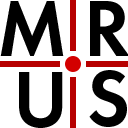
<style>
.page{position:relative;width:128px;height:128px;background:#ffffff}
.page>*{position:absolute;margin:0}
.t1{font:82.3px "FuturaPT-Demi";color:#000000}
</style>
<div class="page">
<p class="t1" style="left:0px;top:1px;width:64px;height:55px">M</p>
<p class="t1" style="left:90px;top:1px;width:40px;height:55px">R</p>
<p class="t1" style="left:19px;top:72px;width:44px;height:56px">U</p>
<p class="t1" style="left:89px;top:70px;width:38px;height:57px">S</p>
</div>
